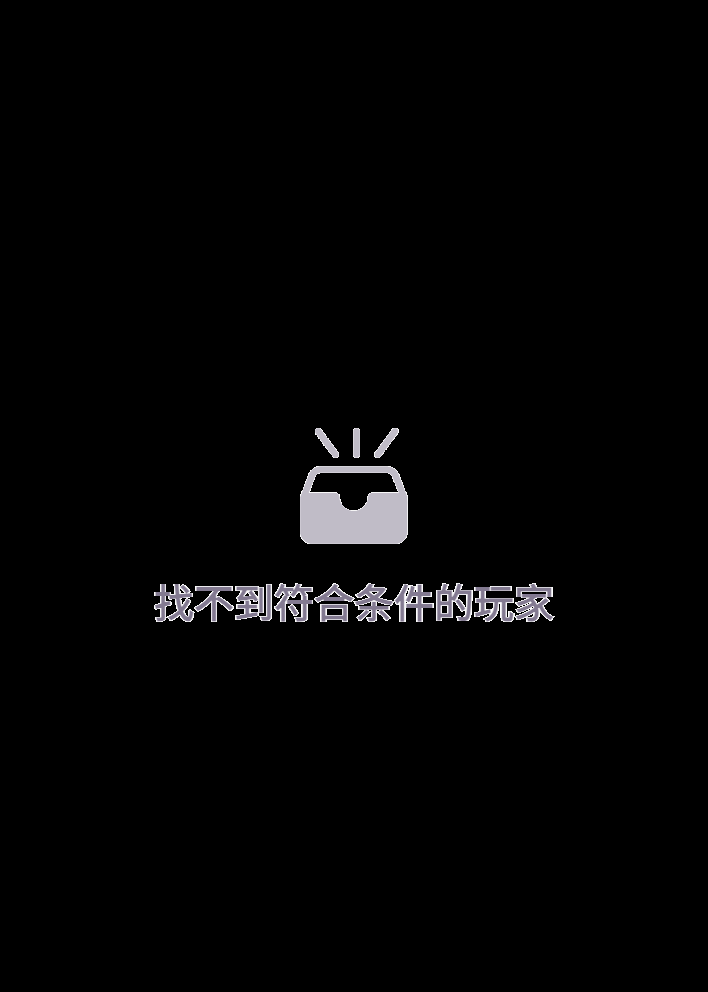
<style>
.page{position:relative;width:708px;height:992px;background:#000000}
.page>*{position:absolute;margin:0}
.t1{font:40px "WebPSD-18463539-0-Regular";color:#837a91;font-weight:bold}
</style>
<div class="page">
<p class="t1" style="left:12px;top:583px;width:684px;height:40px">找不到符合条件的玩家</p>
</div>
